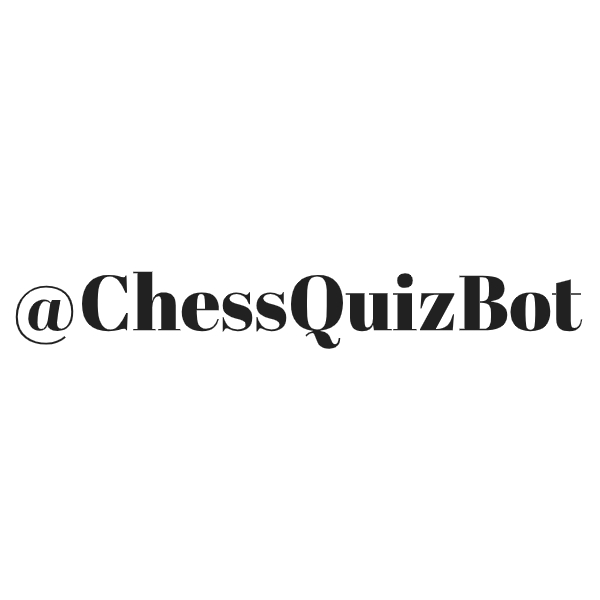
<style>
.page{position:relative;width:600px;height:600px;background:#ffffff}
.page>*{position:absolute;margin:0}
.t1{font:78px "AbrilFatface-Regular";color:#212121}
</style>
<div class="page">
<p class="t1" style="left:15px;top:271px;width:568px;height:78px">@ChessQuizBot</p>
</div>
